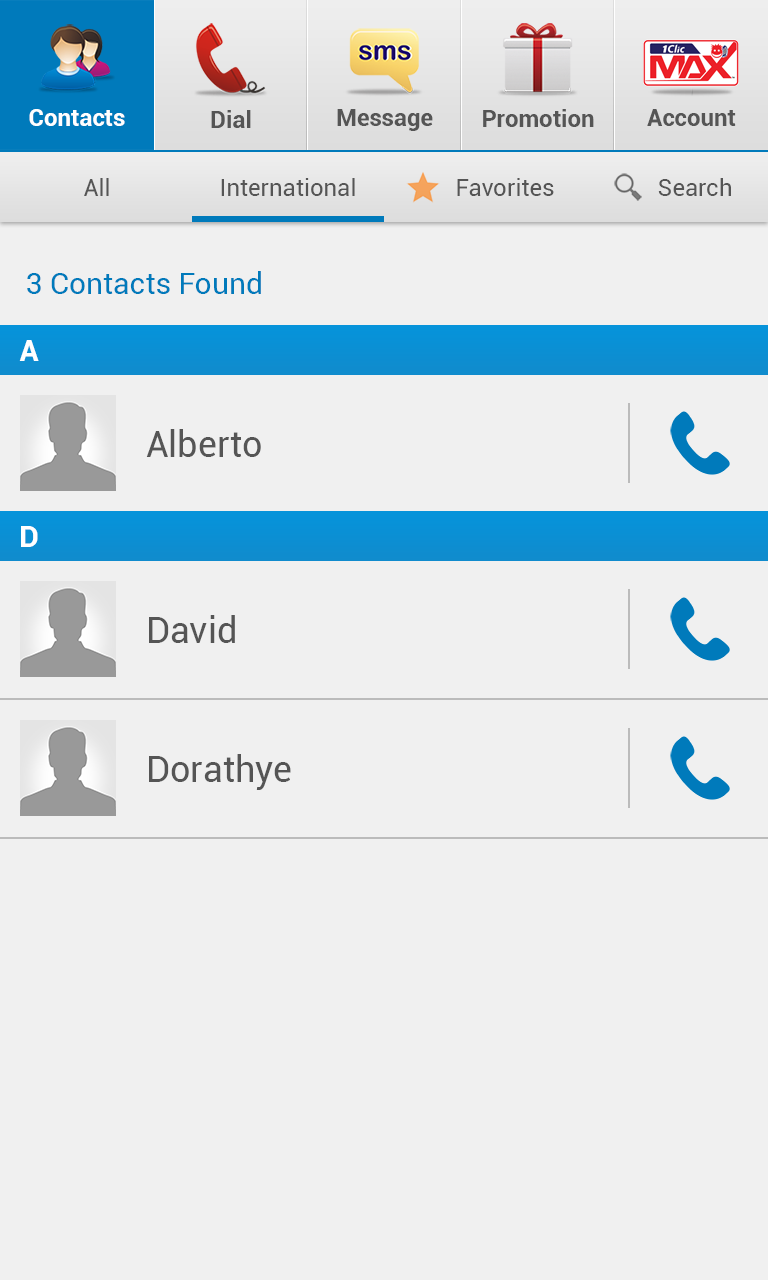
<style>
.page{position:relative;width:768px;height:1280px;background:#f0f0f0}
.page>*{position:absolute;margin:0}
.t1{font:24px "Roboto-Bold";color:#ffffff}
.t2{font:24px "Roboto-Bold";color:#555555}
.t3{font:24px "Roboto-Regular";color:#555555}
.t4{font:30px "Roboto-Regular";color:#007abb}
.t5{font:30px "Roboto-Bold";color:#ffffff}
.t6{font:36px "Roboto-Regular";color:#555555}
</style>
<div class="page">
<p class="t1" style="left:29px;top:109px;width:96px;height:17px">Contacts</p>
<p class="t2" style="left:211px;top:110px;width:40px;height:18px">Dial</p>
<p class="t2" style="left:337px;top:109px;width:96px;height:22px">Message</p>
<p class="t2" style="left:483px;top:109px;width:111px;height:18px">Promotion</p>
<p class="t2" style="left:647px;top:109px;width:89px;height:17px">Account</p>
<p class="t3" style="left:84px;top:178px;width:25px;height:18px">All</p>
<p class="t3" style="left:221px;top:178px;width:134px;height:18px">International</p>
<p class="t3" style="left:457px;top:178px;width:97px;height:18px">Favorites</p>
<p class="t3" style="left:658px;top:178px;width:73px;height:18px">Search</p>
<p class="t4" style="left:27px;top:271px;width:234px;height:23px">3 Contacts Found</p>
<p class="t5" style="left:19px;top:340px;width:20px;height:21px">A</p>
<p class="t6" style="left:146px;top:429px;width:115px;height:28px">Alberto</p>
<p class="t5" style="left:21px;top:526px;width:17px;height:21px">D</p>
<p class="t6" style="left:149px;top:615px;width:86px;height:28px">David</p>
<p class="t6" style="left:149px;top:754px;width:142px;height:36px">Dorathye</p>
</div>
